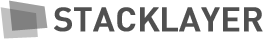
<style>
.page{position:relative;width:265px;height:39px;background:#ffffff}
.page>*{position:absolute;margin:0}
.t1{font:33.3px "DIN-Medium";color:#505050;text-transform:uppercase;font-weight:bold}
</style>
<div class="page">
<p class="t1" style="left:54px;top:7px;width:209px;height:25px">stacklayer</p>
</div>
